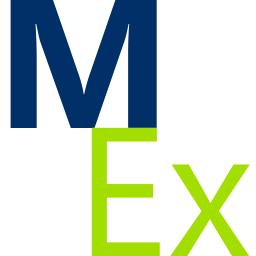
<style>
.page{position:relative;width:256px;height:256px;background:#ffffff}
.page>*{position:absolute;margin:0}
.t1{font:183.3px "SegoeWP-Bold";color:#003067}
.t2{font:183.3px "SegoeWP";color:#a2de00}
</style>
<div class="page">
<p class="t1" style="left:10px;top:0px;width:147px;height:128px">M</p>
<p class="t2" style="left:91px;top:127px;width:159px;height:129px">Ex</p>
</div>
